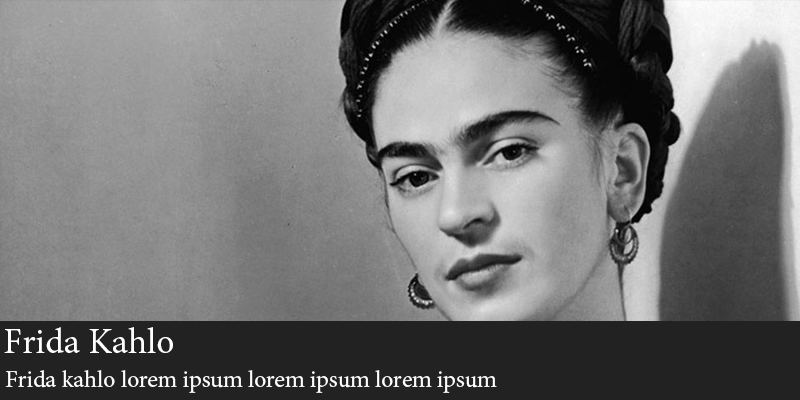
<style>
.page{position:relative;width:800px;height:400px}
.page>*{position:absolute;margin:0}
.t1{font:36px "MinionPro-Regular";color:#ffffff}
.t2{font:24px "MinionPro-Regular";color:#ffffff}
</style>
<div class="page">
<p class="t1" style="left:4px;top:327px;width:169px;height:26px">Frida Kahlo</p>
<p class="t2" style="left:5px;top:370px;width:492px;height:23px">Frida kahlo lorem ipsum lorem ipsum lorem ipsum</p>
</div>
